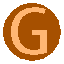
<style>
.page{position:relative;width:64px;height:64px;background:#a65000}
.page>*{position:absolute;margin:0}
.t1{font:60px "AdobeHeitiStd-Regular";color:#ffb673}
</style>
<div class="page">
<p class="t1" style="left:11px;top:7px;width:36px;height:48px">G</p>
</div>
